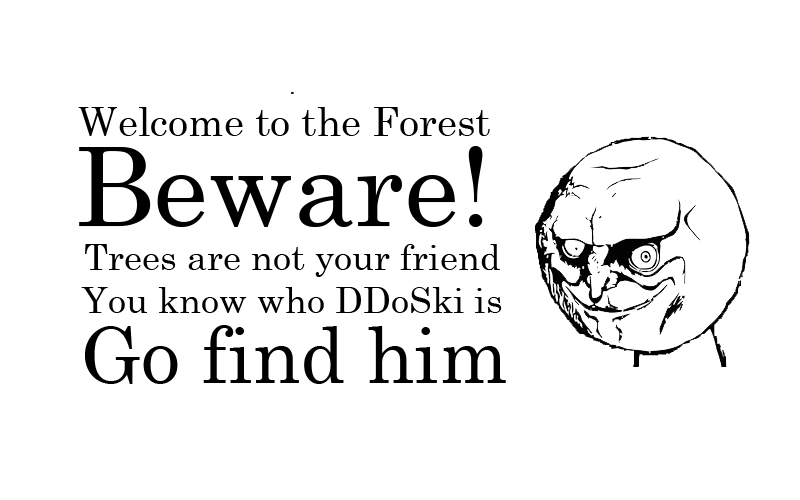
<style>
.page{position:relative;width:800px;height:500px;background:#ffffff}
.page>*{position:absolute;margin:0}
.t1{font:36px "CenturySchoolbook";color:#000000}
.t2{font:24px "CenturySchoolbook";color:#000000}
.t3{font:110px "CenturySchoolbook";color:#000000}
.t4{font:40px "CenturySchoolbook";color:#000000}
.t5{font:78px "CenturySchoolbook";color:#000000}
</style>
<div class="page">
<p class="t1" style="left:79px;top:92px;width:423px;height:221px;text-align:center"><span class="t2">.<br></span><span class="t3">Beware! <br></span>Trees are not your friend<br> You know who DDoSki is</p>
<p class="t4" style="left:78px;top:107px;width:412px;height:29px">Welcome to the Forest</p>
<p class="t5" style="left:85px;top:325px;width:421px;height:59px">Go find him</p>
</div>
